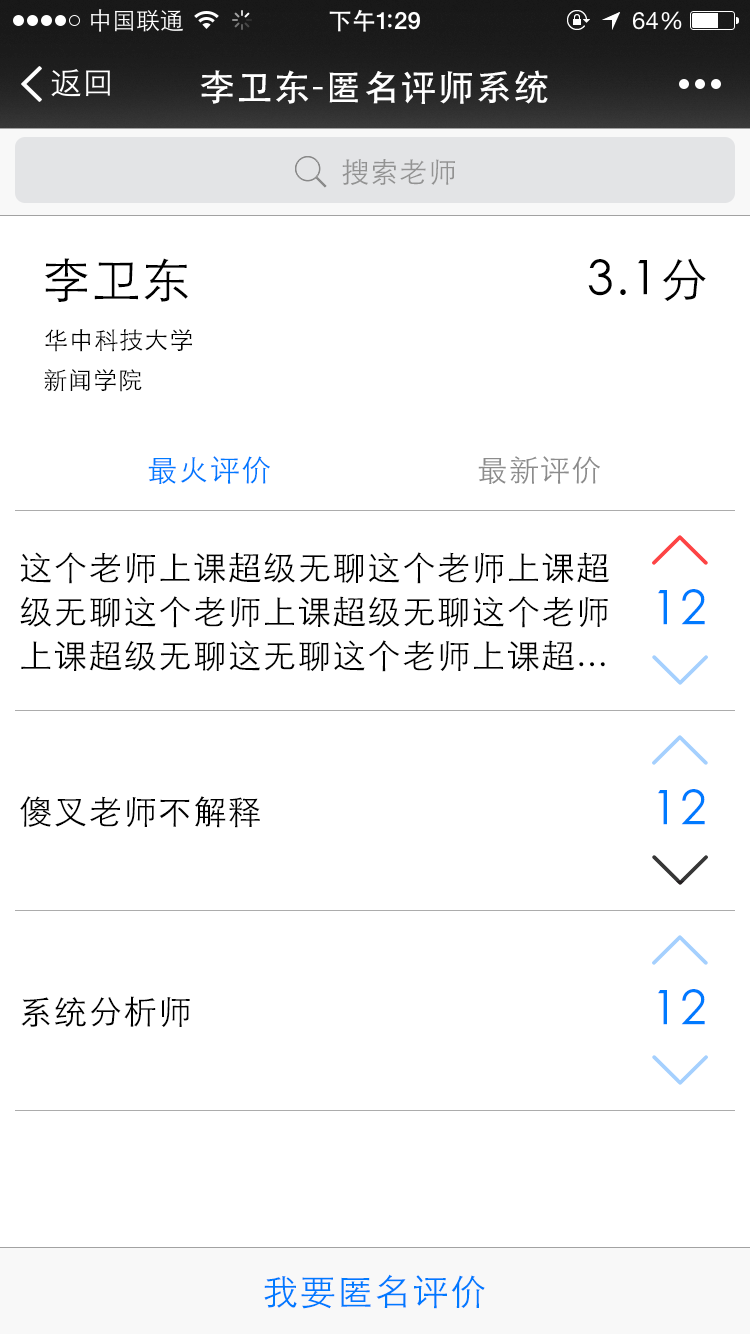
<style>
.page{position:relative;width:750px;height:1334px;background:#ffffff}
.page>*{position:absolute;margin:0}
.t1{font:36px "STHeiti";letter-spacing:0.045em;color:#ffffff}
.t2{font:28px "STXihei";letter-spacing:0.045em;color:#929292}
.t3{font:48px "STXihei";letter-spacing:0.045em;color:#000000}
.t4{font:24px "STXihei";letter-spacing:0.045em;color:#000000}
.t5{font:30px "STXihei";letter-spacing:0.045em;color:#007aff}
.t6{font:30px "STXihei";letter-spacing:0.045em;color:#8c8c8c}
.t7{font:33.3px/11px "STXihei";letter-spacing:0.045em;color:#000000}
.t8{font:48px "STXihei";letter-spacing:0.045em;color:#007aff}
.t9{font:33.3px "STXihei";letter-spacing:0.045em;color:#000000}
.t10{font:36px "STXihei";letter-spacing:0.045em;color:#007aff}
</style>
<div class="page">
<p class="t1" style="left:200px;top:70px;width:348px;height:34px">李卫东-匿名评师系统</p>
<p class="t2" style="left:342px;top:159px;width:113px;height:26px">搜索老师</p>
<p class="t3" style="left:45px;top:258px;width:143px;height:44px">李卫东</p>
<p class="t3" style="left:588px;top:258px;width:118px;height:43px">3.1分</p>
<p class="t4" style="left:45px;top:329px;width:147px;height:23px">华中科技大学</p>
<p class="t4" style="left:44px;top:369px;width:98px;height:23px">新闻学院</p>
<p class="t5" style="left:148px;top:456px;width:122px;height:28px">最火评价</p>
<p class="t6" style="left:478px;top:456px;width:122px;height:28px">最新评价</p>
<p class="t7" style="left:20px;top:552px;width:589px;height:120px">这个老师上课超级无聊这个老师上课超<br><br><br><br>级无聊这个老师上课超级无聊这个老师<br><br><br><br>上课超级无聊这无聊这个老师上课超...</p>
<p class="t8" style="left:658px;top:589px;width:47px;height:36px">12</p>
<p class="t9" style="left:20px;top:796px;width:240px;height:32px">傻叉老师不解释</p>
<p class="t8" style="left:658px;top:789px;width:47px;height:36px">12</p>
<p class="t8" style="left:658px;top:989px;width:47px;height:36px">12</p>
<p class="t9" style="left:21px;top:996px;width:169px;height:31px">系统分析师</p>
<p class="t10" style="left:264px;top:1274px;width:221px;height:35px">我要匿名评价</p>
</div>
